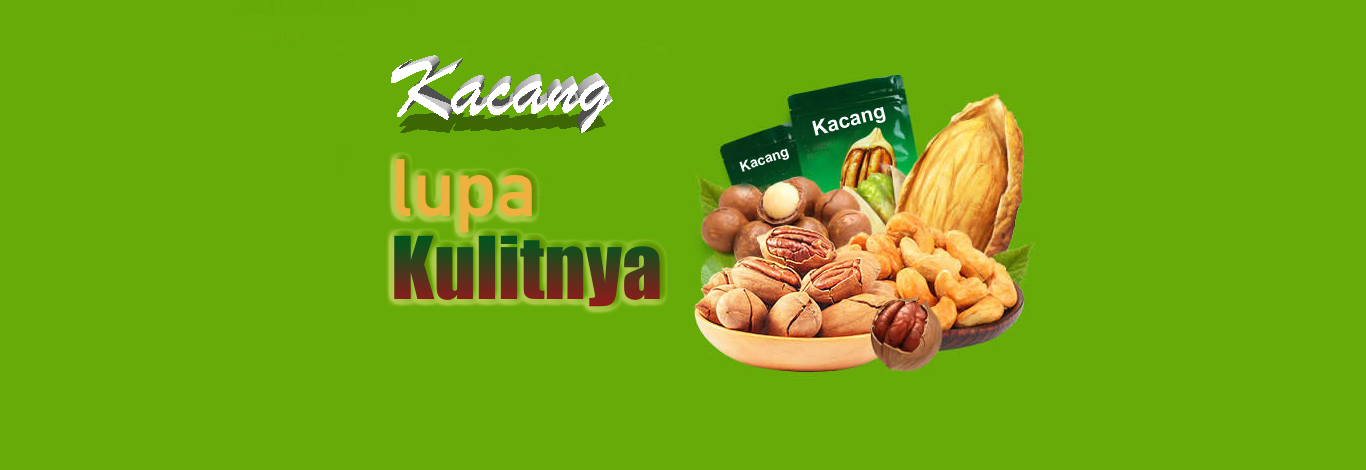
<style>
.page{position:relative;width:1366px;height:470px;background:#67ab08}
.page>*{position:absolute;margin:0}
.t1{font:20.7px "Arial-BoldMT";color:#ffffff}
.t2{font:14px "Arial-BoldMT";color:#ffffff}
.t3{font:80px "DINAlternate-Bold";color:#eeb13f}
.t4{font:80px "Impact"}
</style>
<div class="page">
<p class="t1" style="left:812px;top:107px;width:74px;height:29px;rotate:-14deg">Kacang</p>
<p class="t2" style="left:739px;top:148px;width:50px;height:24px;rotate:-19deg">Kacang</p>
<p class="t3" style="left:396px;top:159px;width:136px;height:74px">lupa</p>
<p class="t4" style="left:394px;top:235px;width:266px;height:72px">Kulitnya</p>
</div>
